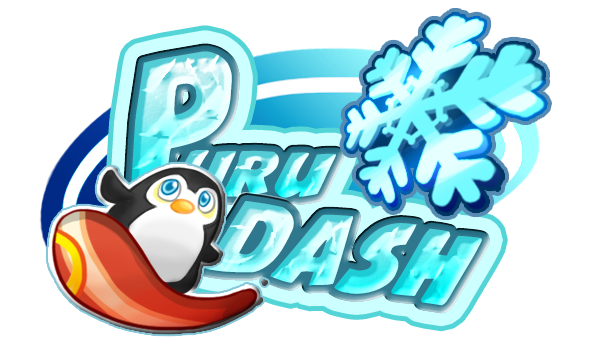
<style>
.page{position:relative;width:600px;height:350px;background:#ffffff}
.page>*{position:absolute;margin:0}
.t1{font:188.7px "Jack'sCandlestickExtra-condensed";letter-spacing:0.04em;scale:1.27 1}
.t2{font:64.5px "Jack'sCandlestickExtra-condensed";letter-spacing:0.04em;scale:1.68 1}
.t3{font:103.7px "Jack'sCandlestickExtra-condensed";letter-spacing:0.023em;scale:1.43 1}
</style>
<div class="page">
<p class="t1" style="left:130px;top:51px;width:102px;height:147px;rotate:-10deg">P</p>
<p class="t2" style="left:174px;top:150px;width:162px;height:48px;rotate:2deg">uru</p>
<p class="t3" style="left:205px;top:201px;width:277px;height:105px;rotate:9deg">DASH</p>
</div>
